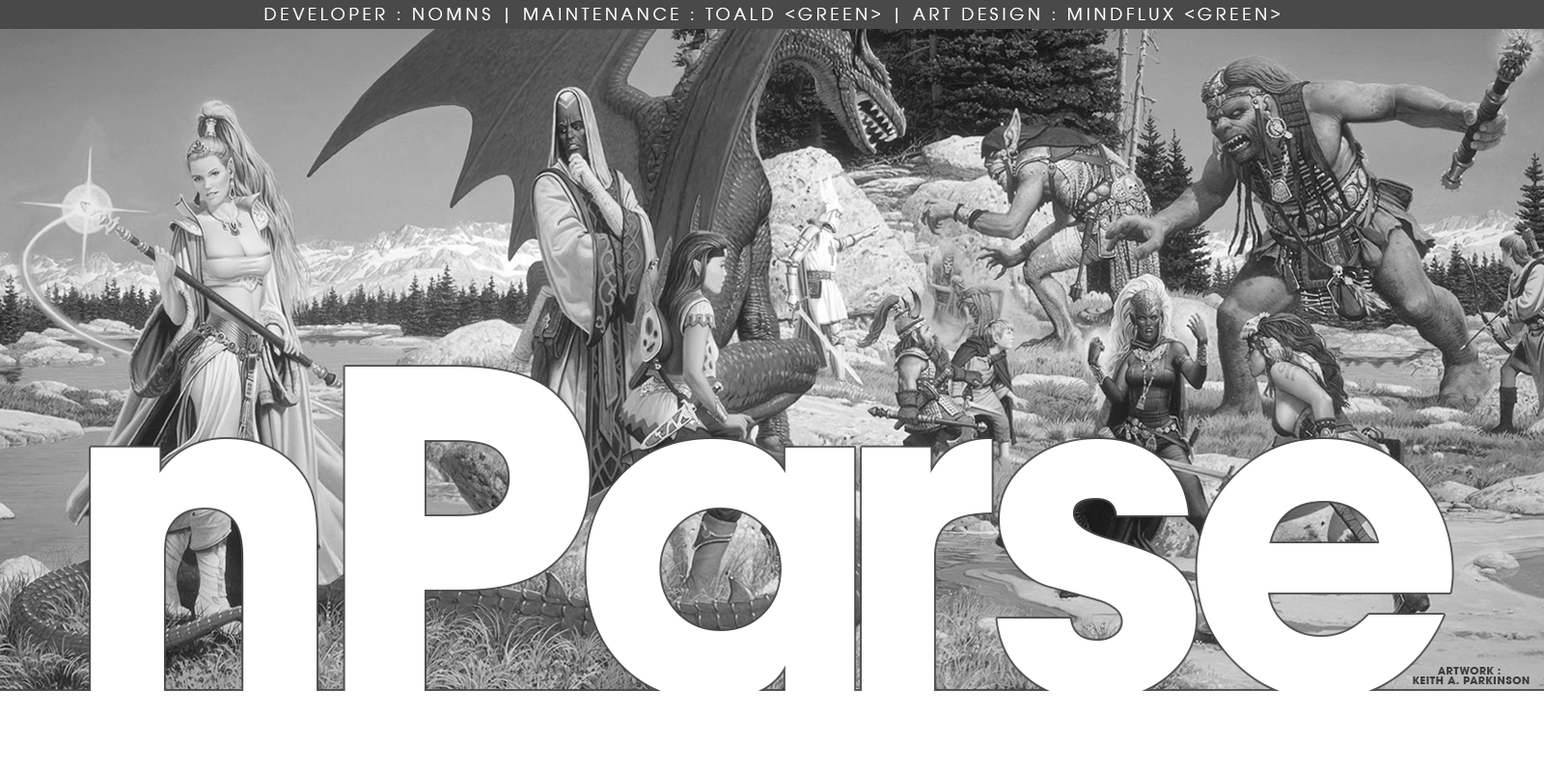
<style>
.page{position:relative;width:1544px;height:772px;background:#ffffff}
.page>*{position:absolute;margin:0}
.t1{font:18.8px "AvignonBook";letter-spacing:0.18em;color:#ffffff;text-transform:uppercase}
.t2{font:11.3px/3.2px "AvignonBold";letter-spacing:0.06em;color:#3c3c3c;text-transform:uppercase}
</style>
<div class="page">
<p class="t1" style="left:264px;top:8px;width:1016px;height:15px">developer : nomns | maintenance : Toald &lt;green&gt; | art design : mindflux &lt;green&gt;</p>
<p class="t2" style="left:1413px;top:667px;width:117px;height:17px;text-align:center">Artwork :<br><br><br> Keith A. Parkinson</p>
</div>
